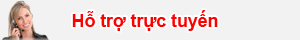
<style>
.page{position:relative;width:300px;height:40px;background:#f2f2f2}
.page>*{position:absolute;margin:0}
.t1{font:17.8px "Arial-BoldMT";color:#ff0000}
</style>
<div class="page">
<p class="t1" style="left:72px;top:10px;width:146px;height:21px">Hỗ trợ trực tuyến</p>
</div>
